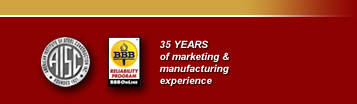
<style>
.page{position:relative;width:357px;height:104px;background:#8e0101}
.page>*{position:absolute;margin:0}
.t1{font:10px "Arial-BoldItalicMT";color:#ffffff}
</style>
<div class="page">
<p class="t1" style="left:159px;top:40px;width:70px;height:46px">35 YEARS<br>of marketing &amp;<br>manufacturing<br>experience</p>
</div>
